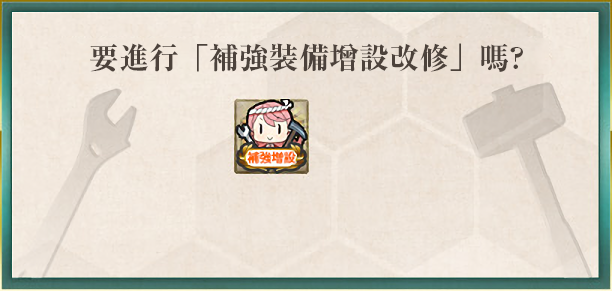
<style>
.page{position:relative;width:612px;height:291px}
.page>*{position:absolute;margin:0}
.t1{font:30px "RyuminPr6N-ExBold";color:#4c423b}
</style>
<div class="page">
<p class="t1" style="left:90px;top:43px;width:433px;height:29px">要進行「補強裝備增設改修」嗎?</p>
</div>
